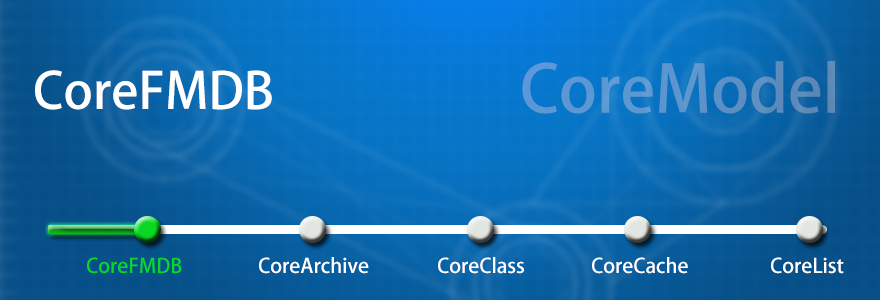
<style>
.page{position:relative;width:880px;height:300px}
.page>*{position:absolute;margin:0}
.t1{font:64.5px "AdobeHeitiStd-Regular";color:#5c94ce}
.t2{font:50px "AdobeHeitiStd-Regular";color:#ffffff}
.t3{font:20px "AdobeHeitiStd-Regular";color:#09d724}
.t4{font:20px "AdobeHeitiStd-Regular";color:#ffffff}
</style>
<div class="page">
<p class="t1" style="left:522px;top:61px;width:313px;height:53px">CoreModel</p>
<p class="t2" style="left:35px;top:70px;width:237px;height:40px">CoreFMDB</p>
<p class="t3" style="left:87px;top:257px;width:95px;height:17px">CoreFMDB</p>
<p class="t4" style="left:259px;top:257px;width:110px;height:17px">CoreArchive</p>
<p class="t4" style="left:438px;top:257px;width:86px;height:17px">CoreClass</p>
<p class="t4" style="left:592px;top:257px;width:96px;height:17px">CoreCache</p>
<p class="t4" style="left:771px;top:257px;width:73px;height:17px">CoreList</p>
</div>
